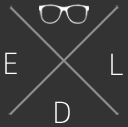
<style>
.page{position:relative;width:128px;height:127px;background:#333333}
.page>*{position:absolute;margin:0}
.t1{font:32.7px "Colaborate-Thin";letter-spacing:0.06em;color:#ffffff;text-transform:uppercase}
</style>
<div class="page">
<p class="t1" style="left:5px;top:52px;width:12px;height:22px">E</p>
<p class="t1" style="left:111px;top:53px;width:12px;height:22px">L</p>
<p class="t1" style="left:55px;top:101px;width:15px;height:22px">D</p>
</div>
